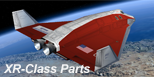
<style>
.page{position:relative;width:154px;height:77px}
.page>*{position:absolute;margin:0}
.t1{font:12px "Arial-BoldItalicMT";color:#f4f4f4}
</style>
<div class="page">
<p class="t1" style="left:3px;top:64px;width:87px;height:10px">XR-Class Parts</p>
</div>
